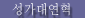
<style>
.page{position:relative;width:85px;height:18px;background:#666699}
.page>*{position:absolute;margin:0}
.t1{font:13.2px "BatangChe";color:#ffffff;scale:0.91 1}
</style>
<div class="page">
<p class="t1" style="left:12px;top:3px;width:58px;height:13px">성가대연혁</p>
</div>
